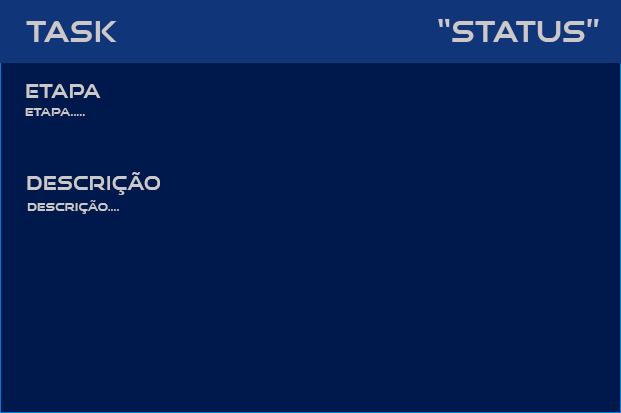
<style>
.page{position:relative;width:621px;height:413px;background:#00194d}
.page>*{position:absolute;margin:0}
.t1{font:30px "Speedy-Regular";color:#cac8c8;text-transform:uppercase}
.t2{font:20px "Speedy-Regular";color:#cac8c8;text-transform:uppercase}
.t3{font:12px "Speedy-Regular";color:#cac8c8;text-transform:uppercase}
</style>
<div class="page">
<p class="t1" style="left:26px;top:21px;width:91px;height:21px">task</p>
<p class="t1" style="left:438px;top:19px;width:161px;height:23px">“status”</p>
<p class="t2" style="left:26px;top:84px;width:75px;height:14px">etapa</p>
<p class="t3" style="left:25px;top:108px;width:60px;height:8px">etapa.....</p>
<p class="t2" style="left:27px;top:172px;width:133px;height:23px">descrição</p>
<p class="t3" style="left:27px;top:200px;width:92px;height:14px">descrição....</p>
</div>
